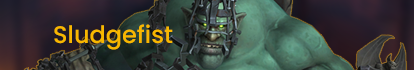
<style>
.page{position:relative;width:414px;height:70px}
.page>*{position:absolute;margin:0}
.t1{font:24px "Poppins-Medium";color:#f8b700}
</style>
<div class="page">
<p class="t1" style="left:54px;top:24px;width:119px;height:26px">Sludgefist</p>
</div>
